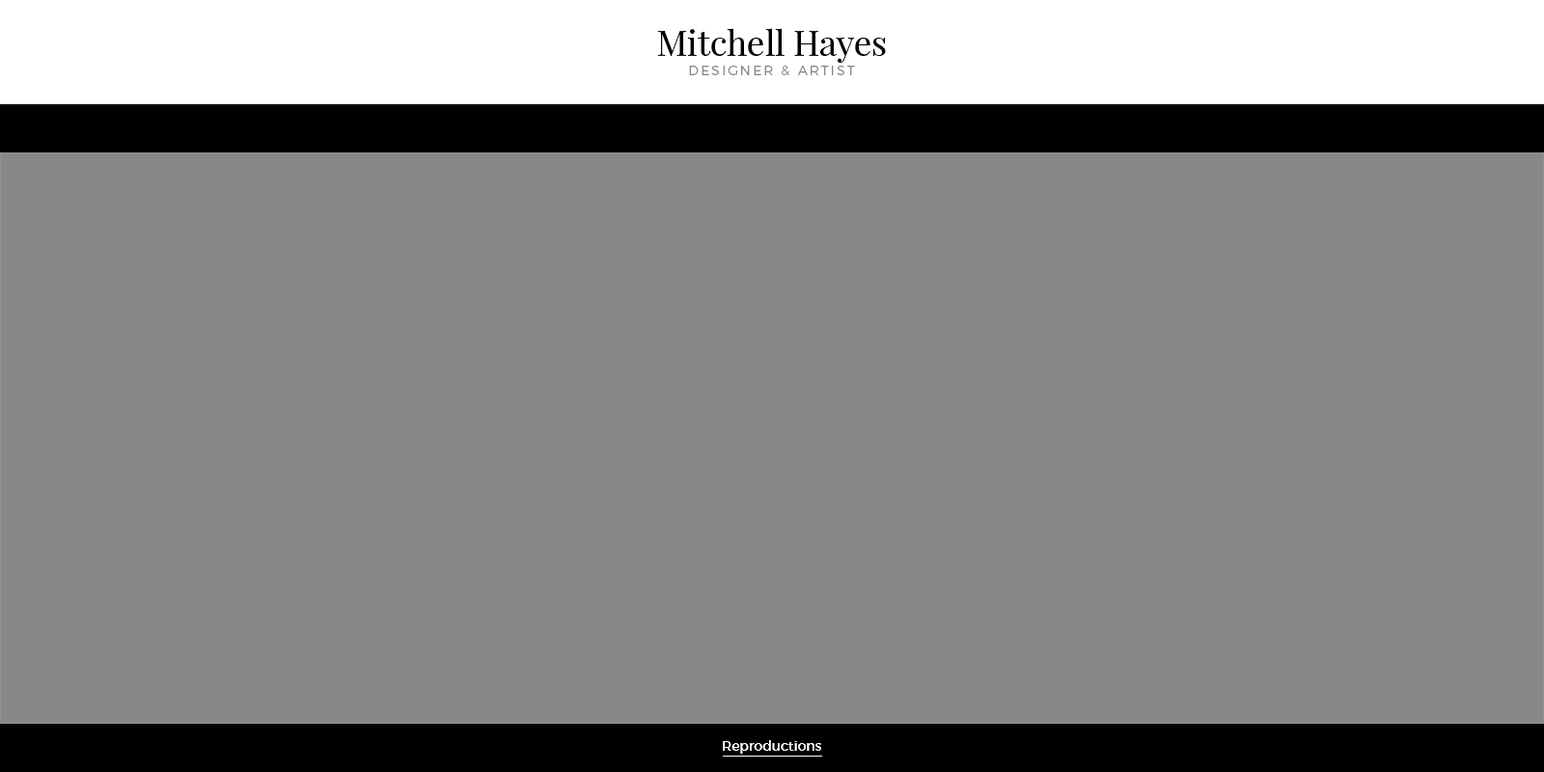
<style>
.page{position:relative;width:1544px;height:772px;background:#888888}
.page>*{position:absolute;margin:0}
.t1{font:34.7px "PlayfairDisplay-Regular";color:#000000}
.t2{font:13.5px "Montserrat-Light";letter-spacing:0.15em;color:#888888}
.t3{font:13.5px "Montserrat-Regular";color:#ffffff}
</style>
<div class="page">
<p class="t1" style="left:658px;top:28px;width:228px;height:35px">Mitchell Hayes</p>
<p class="t2" style="left:689px;top:66px;width:166px;height:9px">DESIGNER &amp; ARTIST</p>
<p class="t3" style="left:723px;top:740px;width:98px;height:14px">Reproductions</p>
</div>
